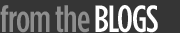
<style>
.page{position:relative;width:180px;height:33px;background:#353535}
.page>*{position:absolute;margin:0}
.t1{font:38px "GothamCondensed-Medium";letter-spacing:-0.025em;color:#8e8e8e}
.t2{font:38px "GothamCondensed-Medium";letter-spacing:-0.025em;color:#ffffff}
</style>
<div class="page">
<p class="t1" style="left:0px;top:5px;width:158px;height:28px">from the <span class="t2">BLOGS</span></p>
</div>
